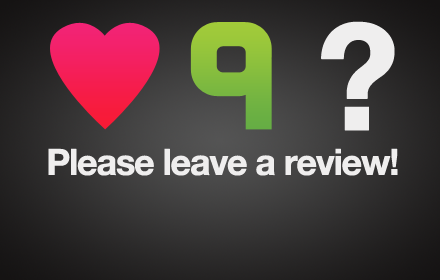
<style>
.page{position:relative;width:440px;height:280px}
.page>*{position:absolute;margin:0}
.t1{font:147.6px "HelveticaNeue-Bold";letter-spacing:-0.06em;color:#efeeee;font-weight:bold}
.t2{font:36px "HelveticaNeue-Bold";letter-spacing:-0.06em;color:#efeeee;font-weight:bold}
</style>
<div class="page">
<p class="t1" style="left:321px;top:21px;width:74px;height:110px">?</p>
<p class="t2" style="left:48px;top:148px;width:350px;height:28px">Please leave a review!</p>
</div>
